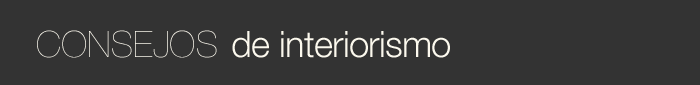
<style>
.page{position:relative;width:700px;height:85px;background:#333333}
.page>*{position:absolute;margin:0}
.t1{font:36.3px "HelveticaNeue-UltraLight";color:#fcf9ee}
.t2{font:36.3px "HelveticaNeue-Light";letter-spacing:-0.02em;color:#fcf9ee}
</style>
<div class="page">
<p class="t1" style="left:37px;top:30px;width:180px;height:28px">CONSEJOS</p>
<p class="t2" style="left:232px;top:31px;width:218px;height:27px">de interiorismo</p>
</div>
